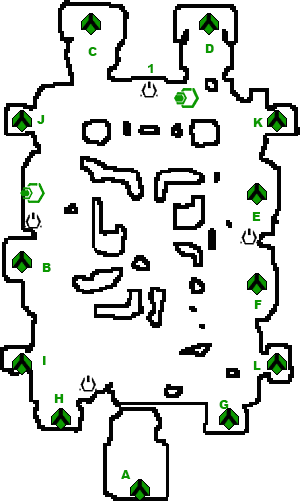
<style>
.page{position:relative;width:300px;height:501px;background:#ffffff}
.page>*{position:absolute;margin:0}
.t1{font:12px "Arial-Black";color:#0c9801}
</style>
<div class="page">
<p class="t1" style="left:88px;top:47px;width:9px;height:9px">C</p>
<p class="t1" style="left:205px;top:44px;width:9px;height:9px">D</p>
<p class="t1" style="left:148px;top:64px;width:5px;height:9px">1</p>
<p class="t1" style="left:37px;top:115px;width:8px;height:9px">J</p>
<p class="t1" style="left:253px;top:118px;width:10px;height:9px">K</p>
<p class="t1" style="left:252px;top:212px;width:9px;height:9px">E</p>
<p class="t1" style="left:42px;top:263px;width:9px;height:9px">B</p>
<p class="t1" style="left:254px;top:300px;width:8px;height:9px">F</p>
<p class="t1" style="left:43px;top:356px;width:3px;height:9px">I</p>
<p class="t1" style="left:253px;top:361px;width:8px;height:9px">L</p>
<p class="t1" style="left:54px;top:394px;width:10px;height:9px">H</p>
<p class="t1" style="left:219px;top:400px;width:10px;height:9px">G</p>
<p class="t1" style="left:121px;top:470px;width:10px;height:9px">A</p>
</div>
